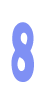
<style>
.page{position:relative;width:50px;height:110px;background:#ffffff}
.page>*{position:absolute;margin:0}
.t1{font:96px "BerlinSansFBDemi-Bold";color:#7f90f4;scale:0.5 1}
</style>
<div class="page">
<p class="t1" style="left:11px;top:22px;width:23px;height:60px">8</p>
</div>
